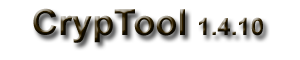
<style>
.page{position:relative;width:300px;height:60px;background:#ffffff}
.page>*{position:absolute;margin:0}
.t1{font:36px "Arial-BoldMT"}
.t2{font:24px "Arial-BoldMT"}
</style>
<div class="page">
<p class="t1" style="left:33px;top:8px;width:230px;height:35px">CrypTool <span class="t2">1.4.10</span></p>
</div>
